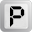
<style>
.page{position:relative;width:32px;height:32px}
.page>*{position:absolute;margin:0}
.t1{font:30.1px "QuartzMS";color:#000000}
</style>
<div class="page">
<p class="t1" style="left:10px;top:6px;width:15px;height:21px">P</p>
</div>
